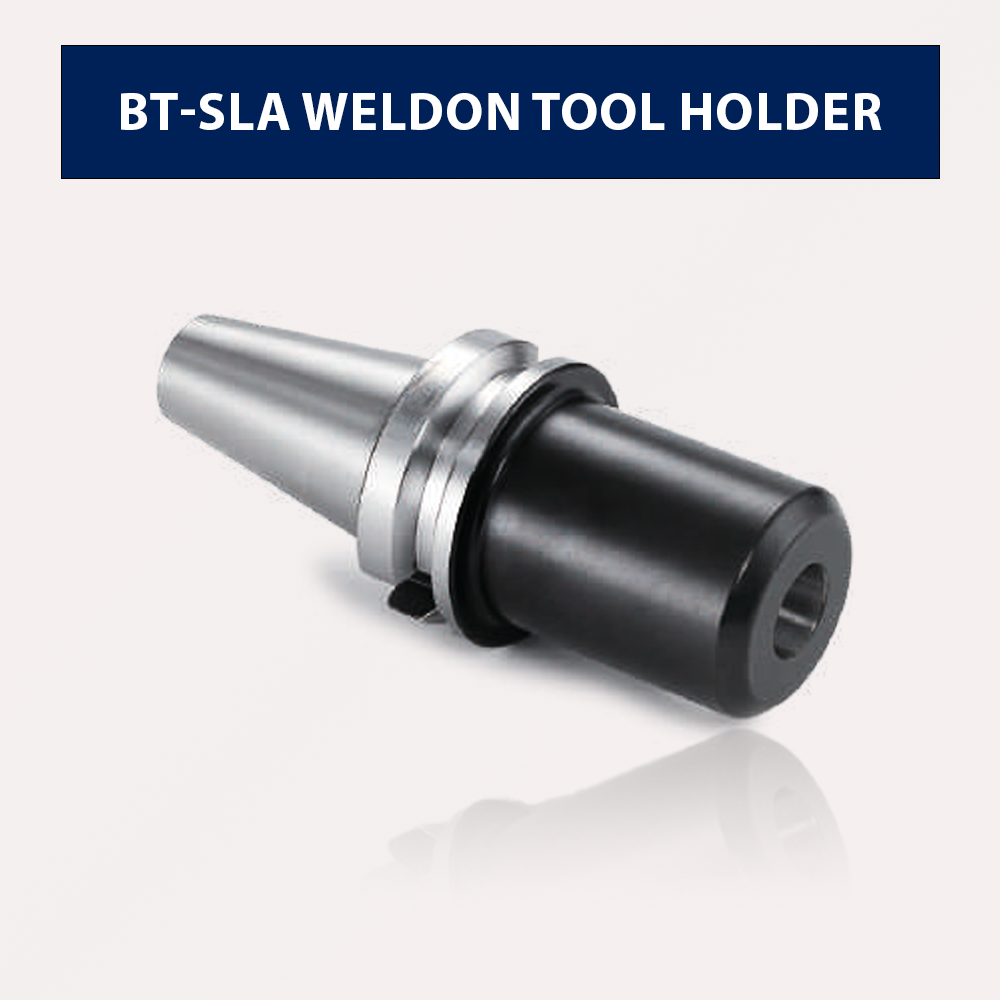
<style>
.page{position:relative;width:1000px;height:1000px;background:#f5efef}
.page>*{position:absolute;margin:0}
.t1{font:53.3px "MyriadPro-Bold";color:#ffffff;text-transform:uppercase}
</style>
<div class="page">
<p class="t1" style="left:121px;top:93px;width:761px;height:37px">BT-SLA WELDON TOOL HOLDER</p>
</div>
